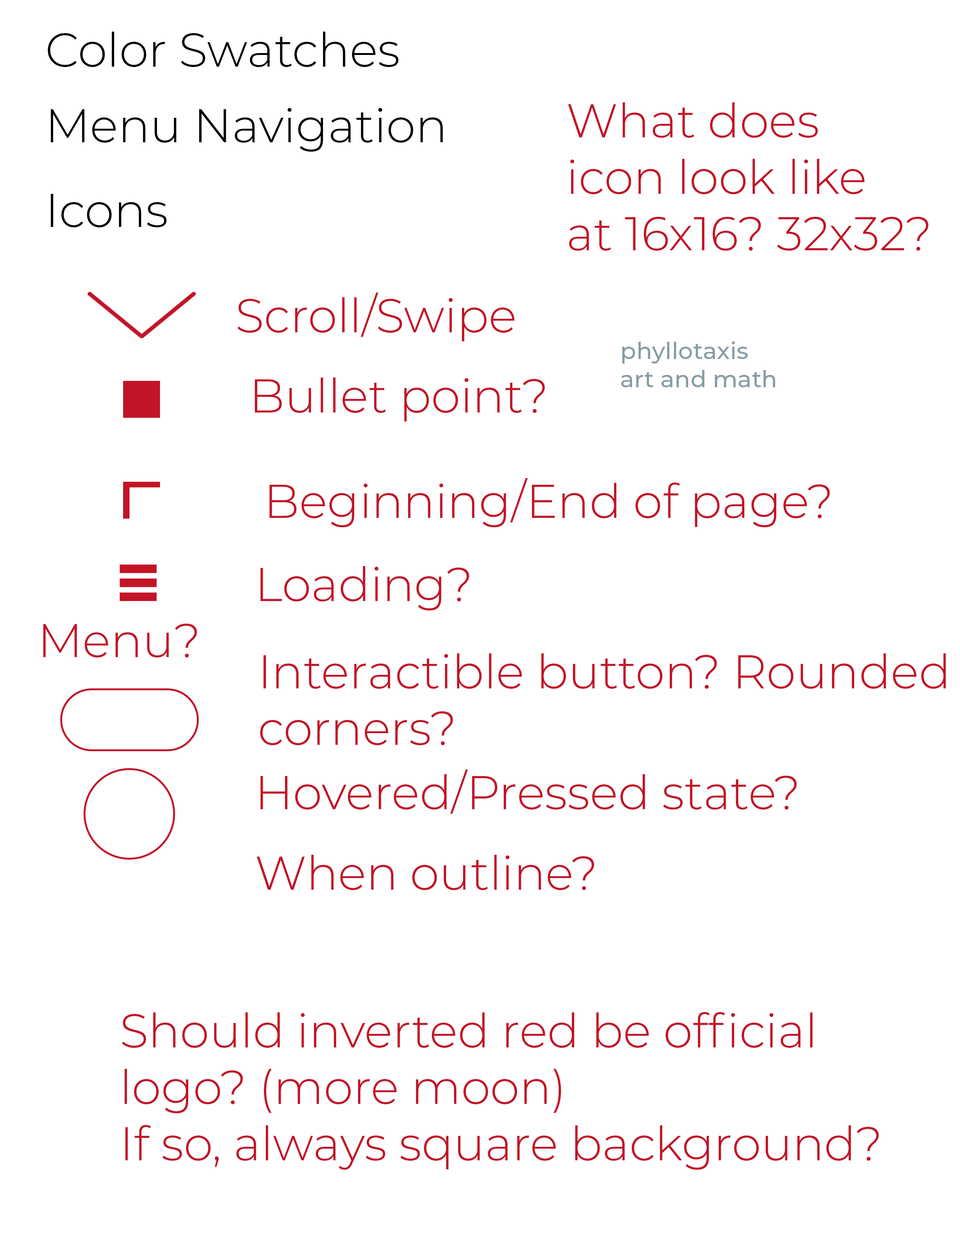
<style>
.page{position:relative;width:960px;height:1242px;background:#ffffff}
.page>*{position:absolute;margin:0}
.t1{font:47.1px "Montserrat-Light";color:#000000}
.t2{font:47.1px "Montserrat-Light";color:#c31427}
.t3{font:23.5px "Montserrat-Medium";color:#889da5}
</style>
<div class="page">
<p class="t1" style="left:48px;top:32px;width:351px;height:35px">Color Swatches</p>
<p class="t1" style="left:51px;top:108px;width:392px;height:44px">Menu Navigation</p>
<p class="t2" style="left:568px;top:102px;width:360px;height:149px">What does<br>icon look like<br>at 16x16? 32x32?</p>
<p class="t1" style="left:51px;top:194px;width:116px;height:34px">Icons</p>
<p class="t2" style="left:238px;top:292px;width:277px;height:49px">Scroll/Swipe</p>
<p class="t3" style="left:621px;top:341px;width:154px;height:46px">phyllotaxis<br>art and math</p>
<p class="t2" style="left:255px;top:378px;width:290px;height:44px">Bullet point?</p>
<p class="t2" style="left:270px;top:478px;width:560px;height:50px">Beginning/End of page?</p>
<p class="t2" style="left:260px;top:566px;width:209px;height:45px">Loading?</p>
<p class="t2" style="left:43px;top:623px;width:154px;height:35px">Menu?</p>
<p class="t2" style="left:260px;top:653px;width:686px;height:93px">Interactible button? Rounded<br>corners?</p>
<p class="t2" style="left:260px;top:769px;width:537px;height:45px">Hovered/Pressed state?</p>
<p class="t2" style="left:257px;top:855px;width:337px;height:36px">When outline?</p>
<p class="t2" style="left:122px;top:1012px;width:757px;height:158px">Should inverted red be official<br>logo? (more moon)<br>If so, always square background?</p>
</div>
